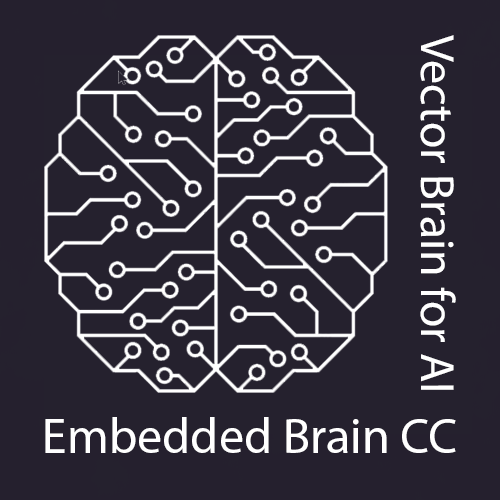
<style>
.page{position:relative;width:500px;height:500px;background:#25212e}
.page>*{position:absolute;margin:0}
.t1{font:48.1px "MyriadPro-Regular";color:#ffffff}
.t2{font:50.1px "MyriadPro-Regular";color:#ffffff}
</style>
<div class="page">
<p class="t1" style="left:420px;top:35px;width:36px;height:355px;rotate:90deg">Vector Brain for AI</p>
<p class="t2" style="left:45px;top:417px;width:411px;height:36px">Embedded Brain CC</p>
</div>
